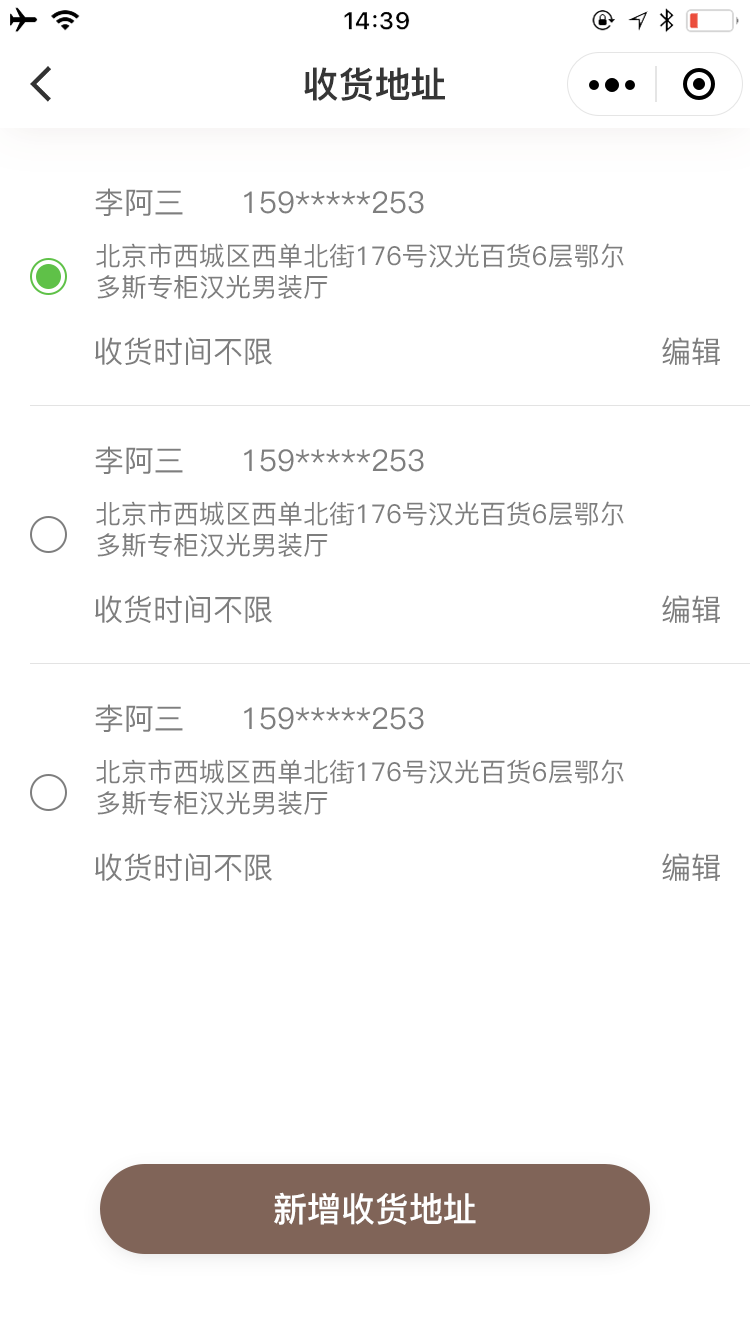
<style>
.page{position:relative;width:750px;height:1334px;background:#ffffff}
.page>*{position:absolute;margin:0}
.t1{font:36px "PingFang-SC-Heavy";color:#363636}
.t2{font:30px "PingFang-SC-Medium";color:#7e7e7e}
.t3{font:26px "PingFang-SC-Medium";color:#7e7e7e}
.t4{font:34px "PingFang-SC-Bold";color:#ffffff}
</style>
<div class="page">
<p class="t1" style="left:304px;top:67px;width:141px;height:35px">收货地址</p>
<p class="t2" style="left:95px;top:188px;width:88px;height:28px">李阿三</p>
<p class="t2" style="left:244px;top:191px;width:180px;height:23px">159*****253</p>
<p class="t3" style="left:96px;top:243px;width:528px;height:56px">北京市西城区西单北街176号汉光百货6层鄂尔多斯专柜汉光男装厅</p>
<p class="t2" style="left:95px;top:337px;width:177px;height:28px">收货时间不限</p>
<p class="t2" style="left:662px;top:337px;width:58px;height:28px">编辑</p>
<p class="t2" style="left:95px;top:446px;width:88px;height:28px">李阿三</p>
<p class="t2" style="left:244px;top:449px;width:180px;height:23px">159*****253</p>
<p class="t3" style="left:96px;top:501px;width:528px;height:56px">北京市西城区西单北街176号汉光百货6层鄂尔多斯专柜汉光男装厅</p>
<p class="t2" style="left:95px;top:595px;width:177px;height:28px">收货时间不限</p>
<p class="t2" style="left:662px;top:595px;width:58px;height:28px">编辑</p>
<p class="t2" style="left:95px;top:704px;width:88px;height:28px">李阿三</p>
<p class="t2" style="left:244px;top:707px;width:180px;height:23px">159*****253</p>
<p class="t3" style="left:96px;top:759px;width:528px;height:56px">北京市西城区西单北街176号汉光百货6层鄂尔多斯专柜汉光男装厅</p>
<p class="t2" style="left:95px;top:853px;width:177px;height:28px">收货时间不限</p>
<p class="t2" style="left:662px;top:853px;width:58px;height:28px">编辑</p>
<p class="t4" style="left:274px;top:1192px;width:202px;height:33px">新增收货地址</p>
</div>
